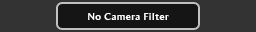
<style>
.page{position:relative;width:256px;height:32px;background:#333333}
.page>*{position:absolute;margin:0}
.t1{font:10px "AmiraParadiso";letter-spacing:0.05em;color:#ffffff}
</style>
<div class="page">
<p class="t1" style="left:88px;top:13px;width:81px;height:7px">No Camera Filter</p>
</div>
